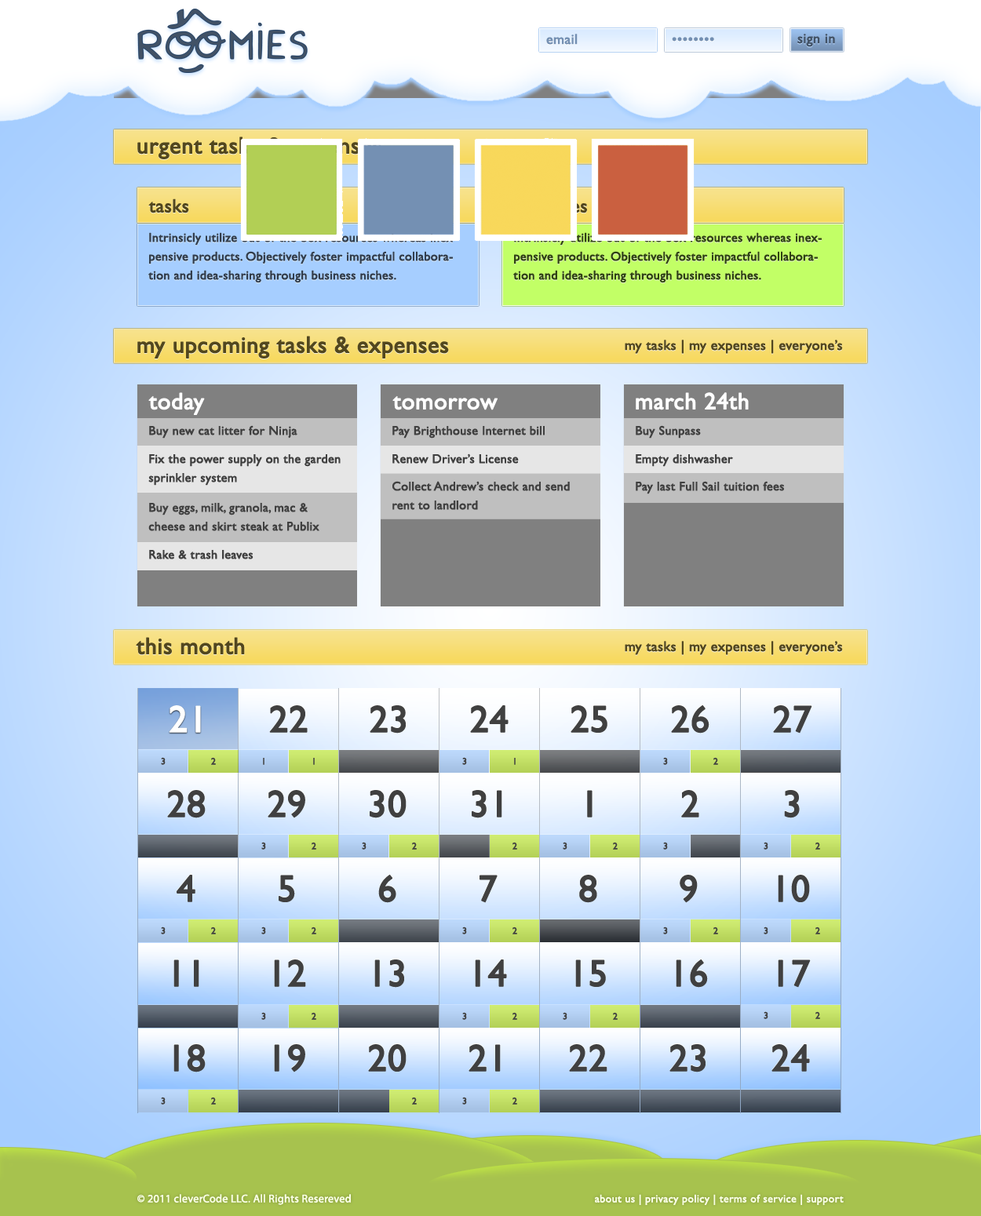
<style>
.page{position:relative;width:981px;height:1216px}
.page>*{position:absolute;margin:0}
.t1{font:14.1px "GillSans";color:#7490b3;font-weight:bold}
.t2{font:14.1px "GillSans";color:#425266;font-weight:bold}
.t3{font:23.5px "GillSans";font-weight:bold}
.t4{font:18.8px "GillSans";color:#52471e;font-weight:bold}
.t5{font:12.6px/18.8px "GillSans";color:#323e4d;font-weight:bold}
.t6{font:12.6px/18.8px "GillSans";color:#304214;font-weight:bold}
.t7{font:23.5px "GillSans";color:#52471e;font-weight:bold}
.t8{font:14.1px "GillSans";color:#52471e;font-weight:bold}
.t9{font:23.5px "GillSans";color:#ffffff;font-weight:bold}
.t10{font:12.6px "GillSans";color:#404040;font-weight:bold}
.t11{font:12.6px/18.8px "GillSans";color:#404040;font-weight:bold}
.t12{font:37.7px "GillSans";color:#ffffff;font-weight:bold}
.t13{font:37.7px "GillSans";color:#404040;font-weight:bold}
.t14{font:9.4px "GillSans";color:#404040;font-weight:bold}
.t15{font:9.4px "GillSans";font-weight:bold}
.t16{font:11px "MyriadPro-Regular";color:#f9ffe5;font-weight:bold}
.t17{font:11px "GillSans";color:#f9ffe5;font-weight:bold}
</style>
<div class="page">
<p class="t1" style="left:546px;top:34px;width:31px;height:11px">email</p>
<p class="t1" style="left:672px;top:37px;width:42px;height:5px">••••••••</p>
<p class="t2" style="left:797px;top:34px;width:38px;height:13px">sign in</p>
<p class="t3" style="left:137px;top:137px;width:244px;height:22px">urgent tasks &amp; expenses</p>
<p class="t4" style="left:148px;top:198px;width:41px;height:15px">tasks</p>
<p class="t5" style="left:148px;top:232px;width:309px;height:51px">Intrinsicly utilize out-of-the-box resources whereas inexpensive products. Objectively foster impactful collaboration and idea-sharing through business niches.</p>
<p class="t6" style="left:513px;top:232px;width:308px;height:51px">Intrinsicly utilize out-of-the-box resources whereas inexpensive products. Objectively foster impactful collaboration and idea-sharing through business niches.</p>
<p class="t7" style="left:137px;top:336px;width:312px;height:23px">my upcoming tasks &amp; expenses</p>
<p class="t8" style="left:624px;top:340px;width:219px;height:14px">my tasks | my expenses | everyone’s</p>
<p class="t9" style="left:148px;top:392px;width:57px;height:23px">today</p>
<p class="t9" style="left:392px;top:395px;width:105px;height:15px">tomorrow</p>
<p class="t9" style="left:635px;top:392px;width:113px;height:18px">march 24th</p>
<p class="t10" style="left:149px;top:425px;width:148px;height:14px">Buy new cat litter for Ninja</p>
<p class="t10" style="left:392px;top:426px;width:152px;height:13px">Pay Brighthouse Internet bill</p>
<p class="t10" style="left:635px;top:425px;width:66px;height:14px">Buy Sunpass</p>
<p class="t11" style="left:148px;top:454px;width:192px;height:32px">Fix the power supply on the garden sprinkler system</p>
<p class="t10" style="left:392px;top:453px;width:127px;height:11px">Renew Driver’s License</p>
<p class="t10" style="left:635px;top:454px;width:98px;height:13px">Empty dishwasher</p>
<p class="t11" style="left:392px;top:481px;width:178px;height:29px">Collect Andrew’s check and send rent to landlord</p>
<p class="t10" style="left:635px;top:481px;width:149px;height:13px">Pay last Full Sail tuition fees</p>
<p class="t11" style="left:148px;top:503px;width:171px;height:28px">Buy eggs, milk, granola, mac &amp; cheese and skirt steak at Publix</p>
<p class="t10" style="left:149px;top:550px;width:104px;height:9px">Rake &amp; trash leaves</p>
<p class="t7" style="left:136px;top:637px;width:109px;height:18px">this month</p>
<p class="t8" style="left:624px;top:641px;width:219px;height:14px">my tasks | my expenses | everyone’s</p>
<p class="t12" style="left:169px;top:705px;width:32px;height:28px">21</p>
<p class="t13" style="left:269px;top:705px;width:39px;height:28px">22</p>
<p class="t13" style="left:370px;top:705px;width:36px;height:29px">23</p>
<p class="t13" style="left:470px;top:705px;width:38px;height:28px">24</p>
<p class="t13" style="left:570px;top:705px;width:37px;height:28px">25</p>
<p class="t13" style="left:671px;top:704px;width:38px;height:30px">26</p>
<p class="t13" style="left:773px;top:705px;width:39px;height:29px">27</p>
<p class="t14" style="left:161px;top:757px;width:5px;height:8px">3</p>
<p class="t14" style="left:211px;top:757px;width:5px;height:8px">2</p>
<p class="t15" style="left:263px;top:758px;width:1px;height:7px">1</p>
<p class="t15" style="left:313px;top:758px;width:2px;height:7px">1</p>
<p class="t14" style="left:462px;top:757px;width:5px;height:8px">3</p>
<p class="t15" style="left:514px;top:758px;width:1px;height:7px">1</p>
<p class="t14" style="left:663px;top:757px;width:5px;height:8px">3</p>
<p class="t14" style="left:713px;top:757px;width:5px;height:8px">2</p>
<p class="t13" style="left:167px;top:790px;width:39px;height:28px">28</p>
<p class="t13" style="left:268px;top:790px;width:37px;height:28px">29</p>
<p class="t13" style="left:370px;top:790px;width:36px;height:28px">30</p>
<p class="t13" style="left:471px;top:790px;width:31px;height:28px">31</p>
<p class="t13" style="left:587px;top:790px;width:5px;height:27px">1</p>
<p class="t13" style="left:681px;top:790px;width:18px;height:27px">2</p>
<p class="t13" style="left:784px;top:790px;width:15px;height:28px">3</p>
<p class="t14" style="left:261px;top:842px;width:5px;height:8px">3</p>
<p class="t14" style="left:311px;top:842px;width:5px;height:8px">2</p>
<p class="t14" style="left:362px;top:842px;width:4px;height:8px">3</p>
<p class="t14" style="left:412px;top:842px;width:5px;height:8px">2</p>
<p class="t14" style="left:512px;top:842px;width:5px;height:8px">2</p>
<p class="t14" style="left:562px;top:842px;width:5px;height:8px">3</p>
<p class="t14" style="left:613px;top:842px;width:4px;height:8px">2</p>
<p class="t14" style="left:663px;top:842px;width:5px;height:8px">3</p>
<p class="t14" style="left:763px;top:842px;width:5px;height:8px">3</p>
<p class="t14" style="left:815px;top:842px;width:5px;height:8px">2</p>
<p class="t13" style="left:177px;top:875px;width:18px;height:27px">4</p>
<p class="t13" style="left:278px;top:875px;width:17px;height:27px">5</p>
<p class="t13" style="left:378px;top:874px;width:18px;height:29px">6</p>
<p class="t13" style="left:479px;top:875px;width:18px;height:28px">7</p>
<p class="t13" style="left:579px;top:875px;width:18px;height:28px">8</p>
<p class="t13" style="left:679px;top:875px;width:18px;height:28px">9</p>
<p class="t13" style="left:777px;top:875px;width:33px;height:27px">10</p>
<p class="t14" style="left:161px;top:927px;width:5px;height:7px">3</p>
<p class="t14" style="left:211px;top:927px;width:5px;height:7px">2</p>
<p class="t14" style="left:261px;top:927px;width:5px;height:7px">3</p>
<p class="t14" style="left:311px;top:927px;width:5px;height:7px">2</p>
<p class="t14" style="left:462px;top:927px;width:5px;height:7px">3</p>
<p class="t14" style="left:512px;top:927px;width:5px;height:7px">2</p>
<p class="t14" style="left:663px;top:927px;width:5px;height:7px">3</p>
<p class="t14" style="left:713px;top:927px;width:5px;height:7px">2</p>
<p class="t14" style="left:763px;top:927px;width:5px;height:7px">3</p>
<p class="t14" style="left:815px;top:927px;width:5px;height:7px">2</p>
<p class="t13" style="left:173px;top:959px;width:26px;height:28px">11</p>
<p class="t13" style="left:274px;top:959px;width:32px;height:28px">12</p>
<p class="t13" style="left:374px;top:959px;width:30px;height:29px">13</p>
<p class="t13" style="left:475px;top:959px;width:32px;height:28px">14</p>
<p class="t13" style="left:575px;top:959px;width:31px;height:28px">15</p>
<p class="t13" style="left:675px;top:959px;width:33px;height:29px">16</p>
<p class="t13" style="left:777px;top:959px;width:33px;height:29px">17</p>
<p class="t14" style="left:261px;top:1012px;width:5px;height:8px">3</p>
<p class="t14" style="left:311px;top:1012px;width:5px;height:8px">2</p>
<p class="t14" style="left:462px;top:1012px;width:5px;height:8px">3</p>
<p class="t14" style="left:512px;top:1012px;width:5px;height:8px">2</p>
<p class="t14" style="left:562px;top:1012px;width:5px;height:8px">3</p>
<p class="t14" style="left:613px;top:1012px;width:4px;height:8px">2</p>
<p class="t14" style="left:763px;top:1011px;width:5px;height:8px">3</p>
<p class="t14" style="left:815px;top:1011px;width:5px;height:8px">2</p>
<p class="t13" style="left:173px;top:1044px;width:33px;height:28px">18</p>
<p class="t13" style="left:274px;top:1044px;width:31px;height:28px">19</p>
<p class="t13" style="left:368px;top:1044px;width:38px;height:28px">20</p>
<p class="t13" style="left:468px;top:1044px;width:33px;height:28px">21</p>
<p class="t13" style="left:569px;top:1044px;width:38px;height:28px">22</p>
<p class="t13" style="left:669px;top:1044px;width:36px;height:28px">23</p>
<p class="t13" style="left:771px;top:1044px;width:39px;height:28px">24</p>
<p class="t14" style="left:161px;top:1097px;width:5px;height:8px">3</p>
<p class="t14" style="left:211px;top:1097px;width:5px;height:8px">2</p>
<p class="t14" style="left:412px;top:1097px;width:5px;height:8px">2</p>
<p class="t14" style="left:462px;top:1097px;width:5px;height:8px">3</p>
<p class="t14" style="left:512px;top:1097px;width:5px;height:8px">2</p>
<p class="t16" style="left:137px;top:1194px;width:214px;height:11px">© 2011 cleverCode LLC. All Rights Resereved</p>
<p class="t17" style="left:595px;top:1194px;width:248px;height:11px">about us | privacy policy | terms of service | support</p>
</div>
